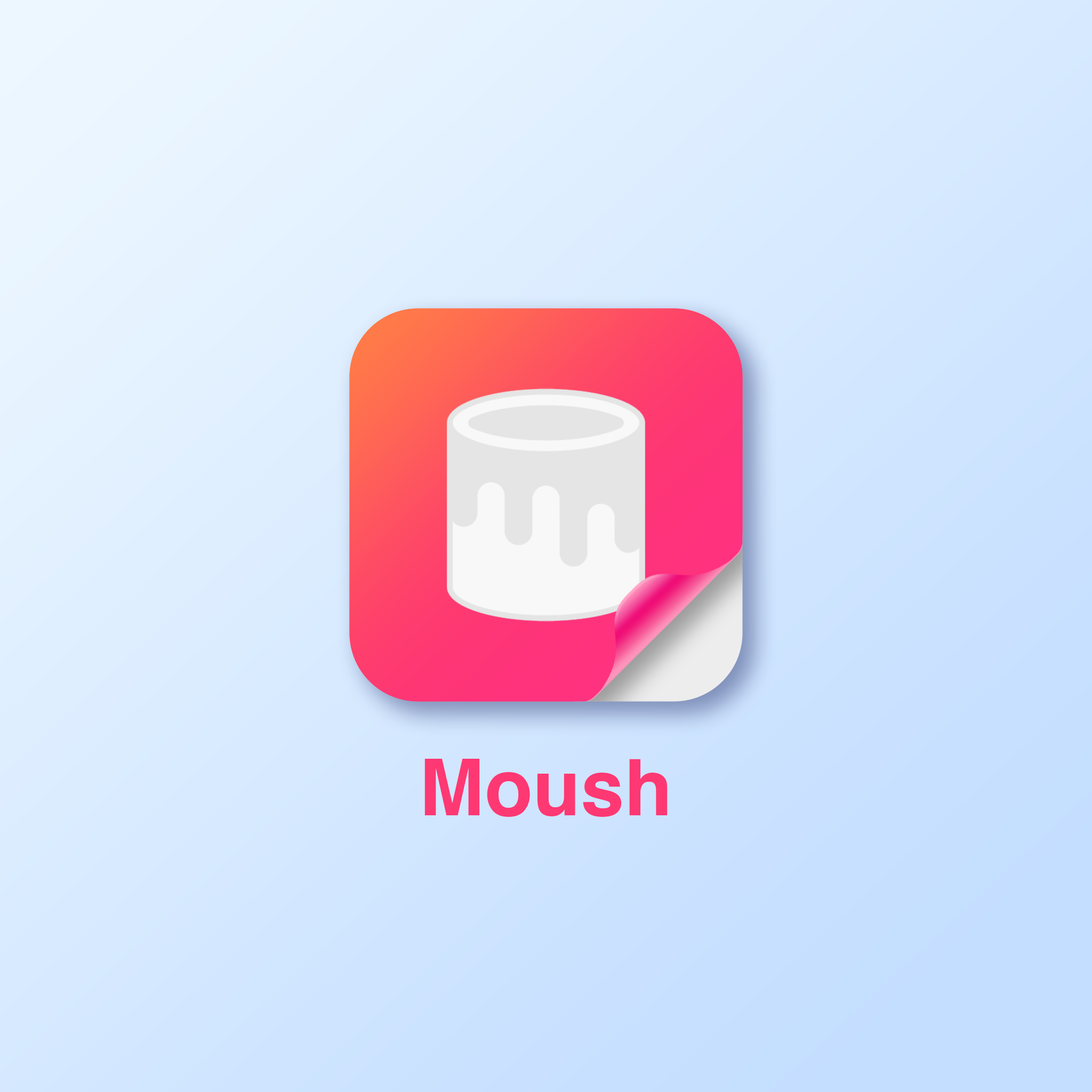
<style>
.page{position:relative;width:1092px;height:1092px}
.page>*{position:absolute;margin:0}
.t1{font:78.5px "Helvetica-Bold";color:#fe3873}
</style>
<div class="page">
<p class="t1" style="left:424px;top:759px;width:244px;height:58px">Moush</p>
</div>
